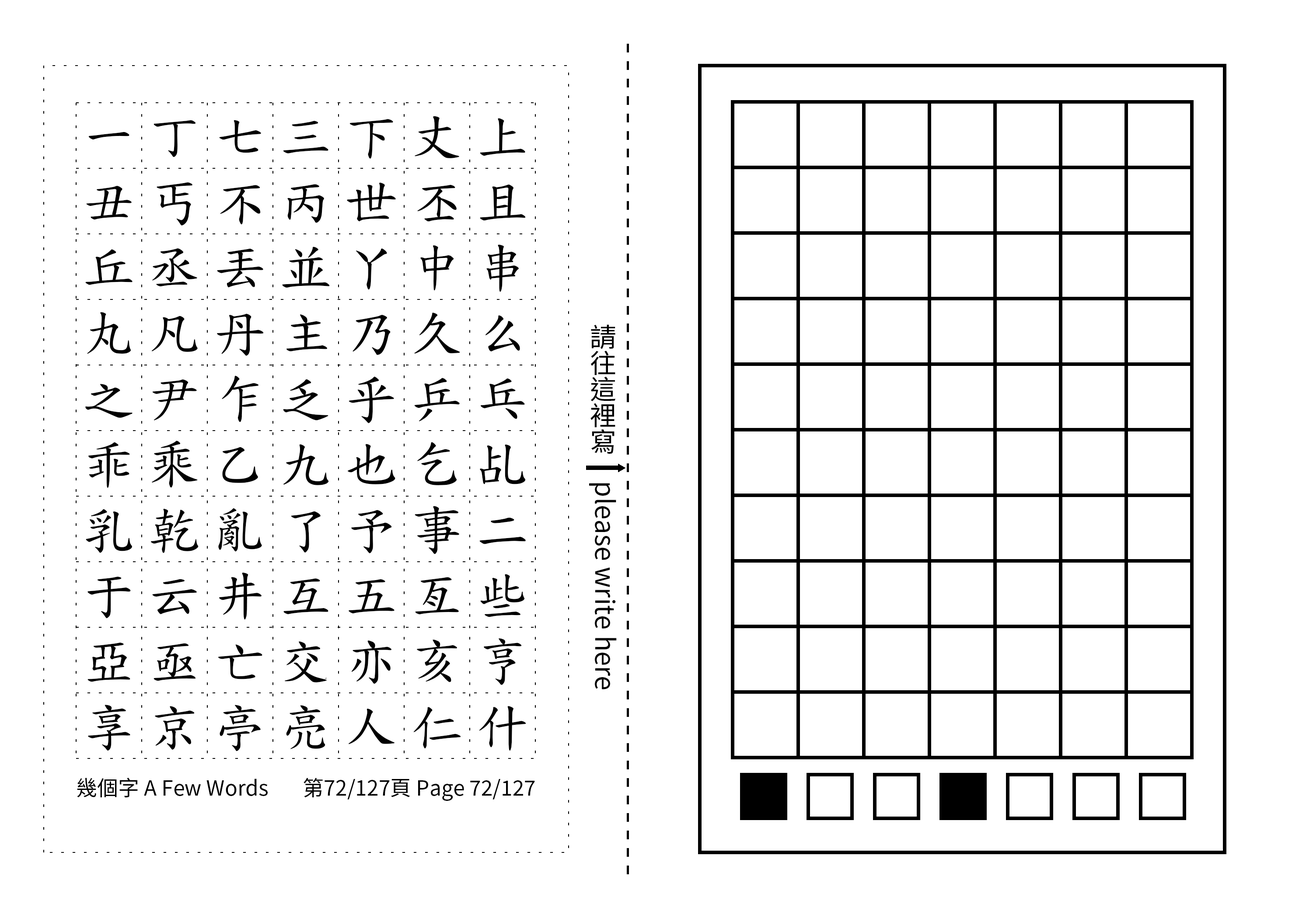
<style>
.page{position:relative;width:1299px;height:918px;background:#ffffff}
.page>*{position:absolute;margin:0}
.t1{font:52.5px/65.6px "TW-Kai-98_1";letter-spacing:0.25em;color:#000000}
.t2{font:26.2px "SourceHanSansTC-Regular";color:#000000}
.t3{font:21px "SourceHanSansTC-Regular";color:#000000}
</style>
<div class="page">
<p class="t1" style="left:85px;top:116px;width:441px;height:636px;text-align:center">一丁七三下丈上丑丐不丙世丕且丘丞丟並丫中串丸凡丹主乃久么之尹乍乏乎乒乓乖乘乙九也乞乩乳乾亂了予事二于云井互五亙些亞亟亡交亦亥亨享京亭亮人仁什</p>
<p class="t2" style="left:589px;top:324px;width:28px;height:366px;text-align:center">請往這裡寫　please write here</p>
<p class="t3" style="left:77px;top:778px;width:191px;height:20px">幾個字 A Few Words</p>
<p class="t3" style="left:303px;top:778px;width:232px;height:23px">第72/127頁 Page 72/127</p>
</div>
